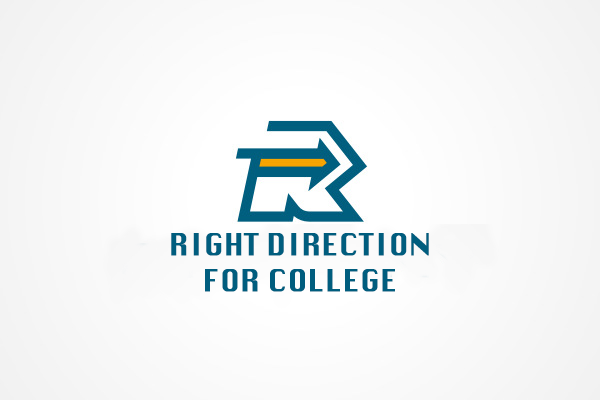
<style>
.page{position:relative;width:600px;height:400px}
.page>*{position:absolute;margin:0}
.t1{font:30px "Krungthep";color:#005d7e}
</style>
<div class="page">
<p class="t1" style="left:171px;top:233px;width:258px;height:59px;text-align:center">RIGHT DIRECTION<br>FOR COLLEGE</p>
</div>
